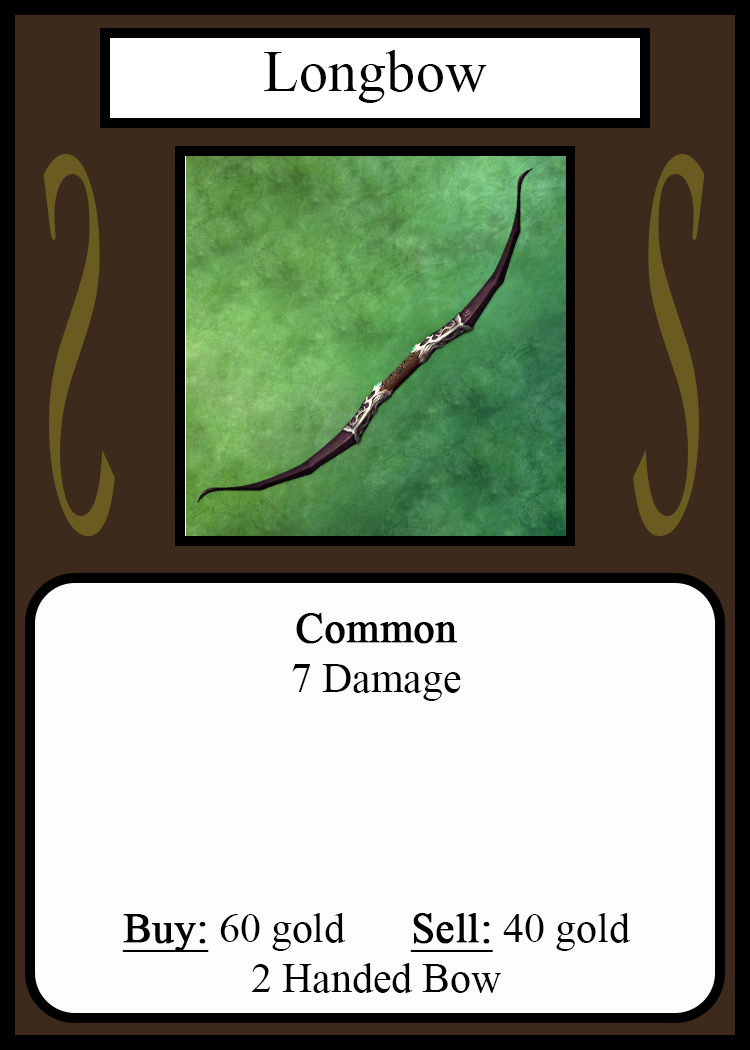
<style>
.page{position:relative;width:750px;height:1050px;background:#fffcfc}
.page>*{position:absolute;margin:0}
.t1{font:58.3px "TimesNewRomanPSMT";color:#010101}
.t2{font:548.5px "Apple-Chancery";color:#6a5c21;scale:0.27 1}
.t3{font:548.2px "Apple-Chancery";color:#6a5c21;scale:0.27 1}
.t4{font:41.7px "TimesNewRomanPSMT";color:#000000}
.t5{font:41.7px "TimesNewRomanPSMT";color:#000000;font-weight:bold}
.t6{font:41.7px "TimesNewRomanPSMT";color:#000000;font-weight:bold;text-decoration:underline}
</style>
<div class="page">
<p class="t1" style="left:264px;top:50px;width:223px;height:53px">Longbow</p>
<p class="t2" style="left:43px;top:154px;width:72px;height:382px;rotate:180deg">S</p>
<p class="t3" style="left:633px;top:154px;width:72px;height:382px">S</p>
<p class="t4" style="left:122px;top:613px;width:509px;height:380px;text-align:center"><span class="t5">Common<br></span>7 Damage<br><br><br><br><br><span class="t6">Buy:</span> 60 gold   <span class="t6">Sell:</span> 40 gold<br>2 Handed Bow</p>
</div>
